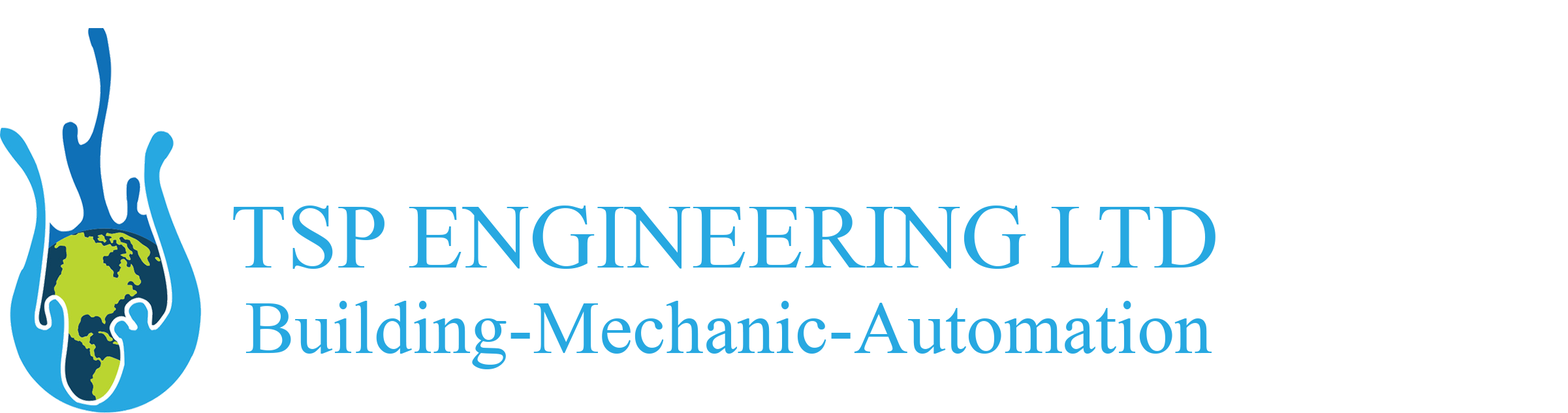
<style>
.page{position:relative;width:1568px;height:413px;background:#ffffff}
.page>*{position:absolute;margin:0}
.t1{font:91.4px "TimesNewRomanPSMT";color:#27a8e1}
.t2{font:75.1px "TimesNewRomanPSMT";color:#27a8e1}
</style>
<div class="page">
<p class="t1" style="left:233px;top:206px;width:982px;height:63px">TSP ENGINEERING LTD</p>
<p class="t2" style="left:245px;top:301px;width:967px;height:68px">Building-Mechanic-Automation</p>
</div>
